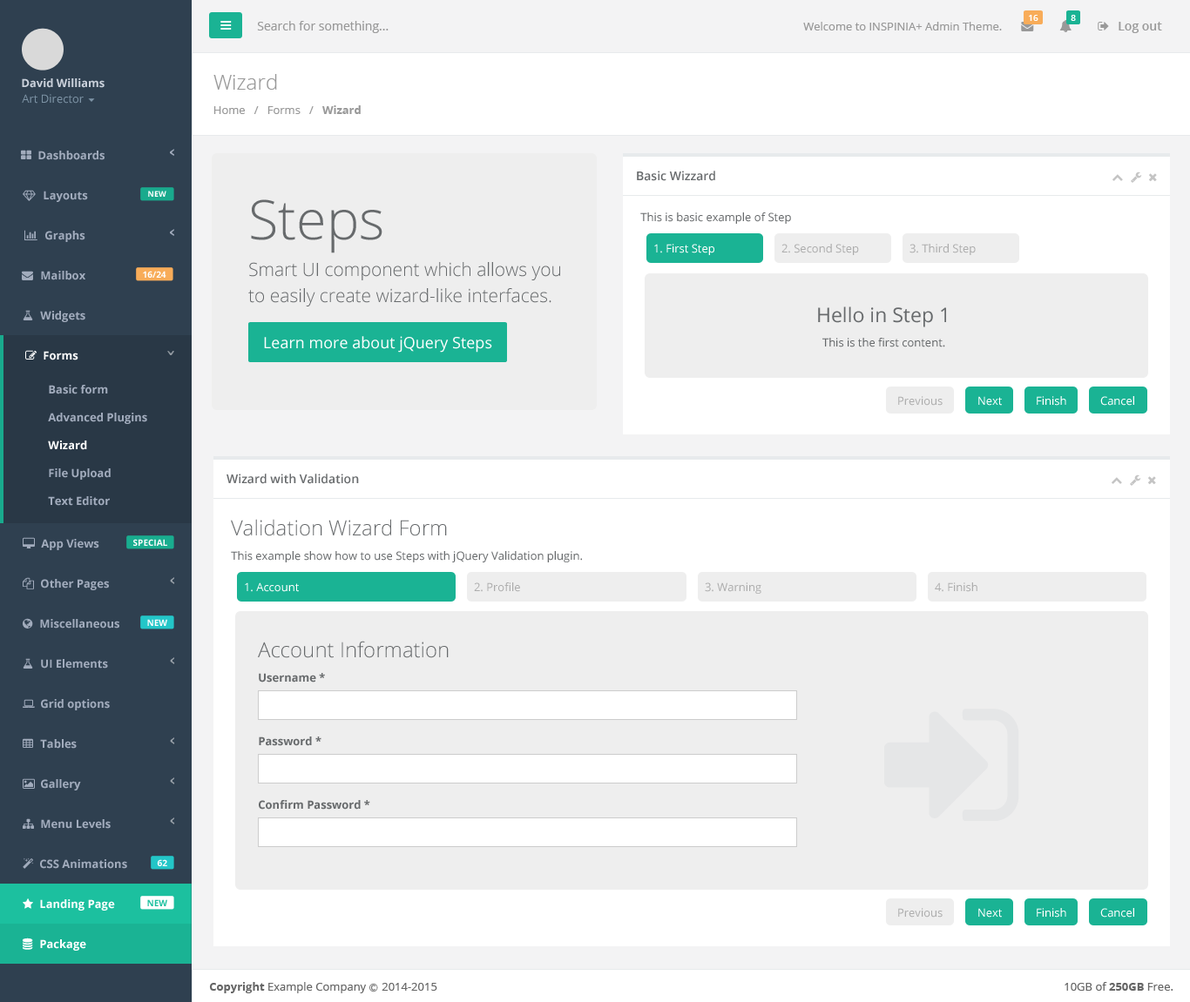
<style>
.page{position:relative;width:1190px;height:1002px;background:#ffffff}
.page>*{position:absolute;margin:0}
.t1{font:8.7px "OpenSans-Semibold";color:#ffffff}
.t2{font:12.2px "OpenSans";color:#999999}
.t3{font:11.3px "OpenSans";color:#999999}
.t4{font:12.2px "OpenSans-Semibold";color:#999999}
.t5{font:20.9px "OpenSans-Light";color:#999999}
.t6{font:11.3px "OpenSans-Bold";color:#cad1db}
.t7{font:11.3px "OpenSans";color:#7d93a5}
.t8{font:11.3px "OpenSans-Bold";color:#999999}
.t9{font:11.3px "OpenSans-Bold";color:#a2acbd}
.t10{font:12.2px "OpenSans-Semibold";color:#676a6c}
.t11{font:7.8px "OpenSans-Bold";color:#fefefe}
.t12{font:54.9px "OpenSans-Light";color:#676a6c}
.t13{font:11.3px "OpenSans";color:#676a6c}
.t14{font:11.3px "OpenSans";color:#ffffff}
.t15{font:11.3px "OpenSans";color:#adadad}
.t16{font:18.3px/26.1px "OpenSans-Light";color:#676a6c}
.t17{font:8.7px "OpenSans-Bold";color:#fefefe}
.t18{font:20px "OpenSans";color:#676a6c}
.t19{font:15.7px "OpenSans";color:#ffffff}
.t20{font:11.3px "OpenSans-Bold";color:#ffffff}
.t21{font:20.9px "OpenSans-Light";color:#676a6c}
.t22{font:11.3px "OpenSans-Bold";color:#676a6c}
.t23{font:8.7px "OpenSans-Bold";color:#1cc09f}
.t24{font:11.3px "OpenSans";color:#666666}
.t25{font:11.3px "OpenSans-Bold";color:#666666}
.t26{font:8.7px "Meiryo";color:#666666}
</style>
<div class="page">
<p class="t1" style="left:1028px;top:15px;width:10px;height:6px">16</p>
<p class="t1" style="left:1070px;top:15px;width:6px;height:6px">8</p>
<p class="t2" style="left:257px;top:21px;width:131px;height:12px">Search for something...</p>
<p class="t3" style="left:803px;top:22px;width:199px;height:8px">Welcome to INSPINIA+ Admin Theme.</p>
<p class="t4" style="left:1118px;top:22px;width:44px;height:11px">Log out</p>
<p class="t5" style="left:213px;top:74px;width:64px;height:16px">Wizard</p>
<p class="t6" style="left:22px;top:78px;width:83px;height:10px">David Williams</p>
<p class="t7" style="left:22px;top:94px;width:62px;height:10px">Art Director</p>
<p class="t3" style="left:213px;top:105px;width:148px;height:9px">Home   /   Forms   /   <span class="t8">Wizard</span></p>
<p class="t9" style="left:38px;top:151px;width:67px;height:9px">Dashboards</p>
<p class="t10" style="left:637px;top:171px;width:78px;height:10px">Basic Wizzard</p>
<p class="t9" style="left:44px;top:191px;width:44px;height:11px">Layouts</p>
<p class="t11" style="left:148px;top:191px;width:18px;height:6px">NEW</p>
<p class="t12" style="left:251px;top:199px;width:131px;height:54px">Steps</p>
<p class="t13" style="left:640px;top:212px;width:151px;height:12px">This is basic example of Step</p>
<p class="t9" style="left:45px;top:231px;width:40px;height:11px">Graphs</p>
<p class="t14" style="left:654px;top:244px;width:60px;height:11px">1. First Step</p>
<p class="t15" style="left:781px;top:244px;width:78px;height:11px">2. Second Step</p>
<p class="t15" style="left:909px;top:244px;width:66px;height:11px">3. Third Step</p>
<p class="t16" style="left:248px;top:262px;width:312px;height:45px">Smart UI component which allows you<br>to easily create wizard-like interfaces.</p>
<p class="t9" style="left:41px;top:271px;width:44px;height:9px">Mailbox</p>
<p class="t17" style="left:143px;top:271px;width:23px;height:7px">16/24</p>
<p class="t9" style="left:40px;top:311px;width:45px;height:11px">Widgets</p>
<p class="t18" style="left:818px;top:307px;width:128px;height:20px">Hello in Step 1</p>
<p class="t19" style="left:264px;top:336px;width:228px;height:17px">Learn more about jQuery Steps</p>
<p class="t13" style="left:822px;top:338px;width:123px;height:9px">This is the first content.</p>
<p class="t20" style="left:44px;top:351px;width:34px;height:10px">Forms</p>
<p class="t9" style="left:49px;top:385px;width:59px;height:10px">Basic form</p>
<p class="t15" style="left:898px;top:396px;width:44px;height:10px">Previous</p>
<p class="t14" style="left:978px;top:396px;width:24px;height:10px">Next</p>
<p class="t14" style="left:1036px;top:396px;width:30px;height:10px">Finish</p>
<p class="t14" style="left:1100px;top:396px;width:34px;height:10px">Cancel</p>
<p class="t9" style="left:48px;top:413px;width:99px;height:11px">Advanced Plugins</p>
<p class="t20" style="left:48px;top:441px;width:39px;height:9px">Wizard</p>
<p class="t9" style="left:49px;top:469px;width:62px;height:11px">File Upload</p>
<p class="t10" style="left:226px;top:474px;width:133px;height:10px">Wizard with Validation</p>
<p class="t9" style="left:48px;top:496px;width:62px;height:10px">Text Editor</p>
<p class="t21" style="left:231px;top:519px;width:216px;height:17px">Validation Wizard Form</p>
<p class="t9" style="left:41px;top:539px;width:58px;height:11px">App Views</p>
<p class="t17" style="left:133px;top:539px;width:34px;height:7px">SPECIAL</p>
<p class="t13" style="left:231px;top:551px;width:351px;height:12px">This example show how to use Steps with jQuery Validation plugin.</p>
<p class="t9" style="left:41px;top:579px;width:68px;height:11px">Other Pages</p>
<p class="t14" style="left:245px;top:583px;width:54px;height:9px">1. Account</p>
<p class="t15" style="left:474px;top:583px;width:46px;height:9px">2. Profile</p>
<p class="t15" style="left:705px;top:583px;width:56px;height:11px">3. Warning</p>
<p class="t15" style="left:934px;top:583px;width:43px;height:9px">4. Finish</p>
<p class="t9" style="left:40px;top:619px;width:79px;height:10px">Miscellaneous</p>
<p class="t17" style="left:147px;top:619px;width:20px;height:7px">NEW</p>
<p class="t21" style="left:258px;top:641px;width:190px;height:17px">Account Information</p>
<p class="t9" style="left:41px;top:659px;width:67px;height:10px">UI Elements</p>
<p class="t22" style="left:259px;top:673px;width:66px;height:10px">Username *</p>
<p class="t9" style="left:41px;top:699px;width:69px;height:12px">Grid options</p>
<p class="t22" style="left:259px;top:737px;width:62px;height:9px">Password *</p>
<p class="t9" style="left:40px;top:739px;width:37px;height:10px">Tables</p>
<p class="t9" style="left:41px;top:779px;width:40px;height:12px">Gallery</p>
<p class="t22" style="left:259px;top:800px;width:111px;height:10px">Confirm Password *</p>
<p class="t9" style="left:41px;top:819px;width:70px;height:10px">Menu Levels</p>
<p class="t9" style="left:40px;top:860px;width:87px;height:9px">CSS Animations</p>
<p class="t17" style="left:157px;top:860px;width:10px;height:7px">62</p>
<p class="t20" style="left:40px;top:900px;width:75px;height:11px">Landing Page</p>
<p class="t23" style="left:147px;top:900px;width:20px;height:7px">NEW</p>
<p class="t15" style="left:898px;top:908px;width:44px;height:10px">Previous</p>
<p class="t14" style="left:978px;top:908px;width:24px;height:10px">Next</p>
<p class="t14" style="left:1036px;top:908px;width:30px;height:10px">Finish</p>
<p class="t14" style="left:1100px;top:908px;width:34px;height:10px">Cancel</p>
<p class="t20" style="left:40px;top:940px;width:46px;height:11px">Package</p>
<p class="t24" style="left:209px;top:982px;width:228px;height:12px"><span class="t25">Copyright</span> Example Company <span class="t26">Ⓒ </span>2014-2015</p>
<p class="t24" style="left:1064px;top:982px;width:109px;height:9px">10GB of <span class="t25">250GB</span> Free.</p>
</div>
